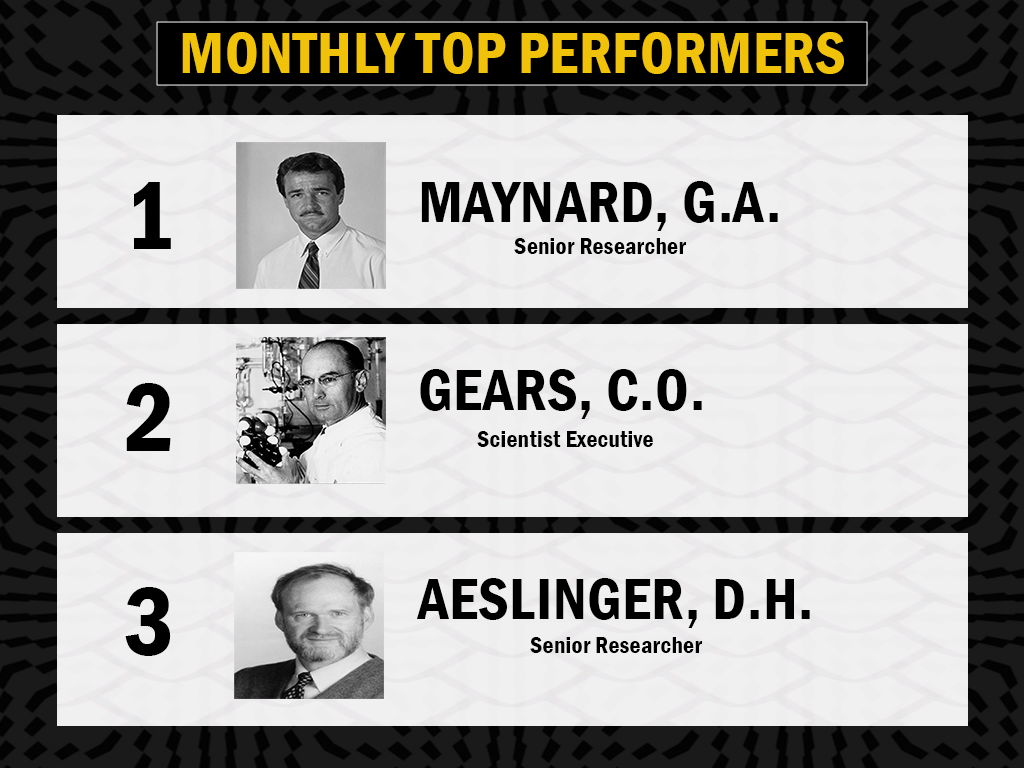
<style>
.page{position:relative;width:1024px;height:768px;background:#f0f0f0}
.page>*{position:absolute;margin:0}
.t1{font:60px "FranklinGothic-DemiCond";letter-spacing:0.01em;color:#f0c20a;text-transform:uppercase}
.t2{font:100px "FranklinGothic-DemiCond";letter-spacing:0.01em;color:#000000;text-transform:uppercase}
.t3{font:60px "FranklinGothic-DemiCond";letter-spacing:0.01em;color:#000000;text-transform:uppercase}
.t4{font:24px "FranklinGothic-DemiCond";letter-spacing:0.01em;color:#000000}
</style>
<div class="page">
<p class="t1" style="left:182px;top:32px;width:662px;height:42px">Monthly Top Performers</p>
<p class="t2" style="left:134px;top:182px;width:37px;height:67px">1</p>
<p class="t3" style="left:421px;top:181px;width:357px;height:50px">Maynard, g.a.</p>
<p class="t4" style="left:514px;top:238px;width:172px;height:16px">Senior Researcher</p>
<p class="t3" style="left:420px;top:369px;width:282px;height:50px">gears, c.o.</p>
<p class="t2" style="left:126px;top:383px;width:45px;height:68px">2</p>
<p class="t4" style="left:477px;top:431px;width:176px;height:16px">Scientist Executive</p>
<p class="t3" style="left:416px;top:578px;width:394px;height:50px">Aeslinger, d.h.</p>
<p class="t2" style="left:125px;top:587px;width:46px;height:69px">3</p>
<p class="t4" style="left:530px;top:637px;width:172px;height:16px">Senior Researcher</p>
</div>
